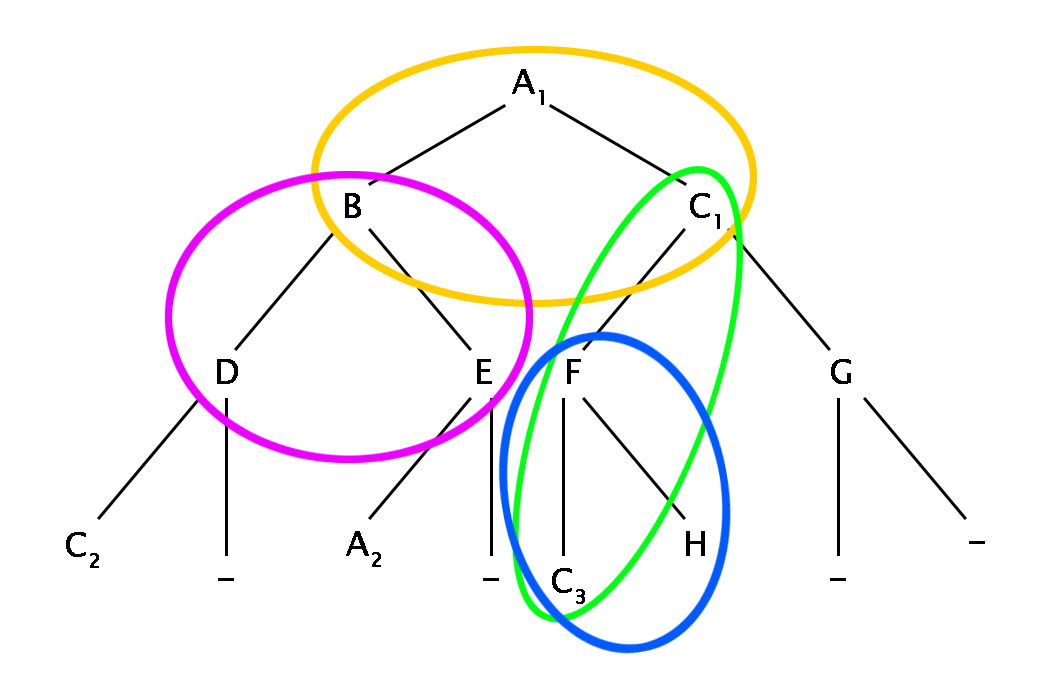
<style>
.page{position:relative;width:1050px;height:700px;background:#ffffff}
.page>*{position:absolute;margin:0}
.t1{font:12px "LucidaSansUnicode";color:#000000;font-weight:bold}
</style>
<div class="page">
<p class="t1" style="left:512px;top:69px;width:32px;height:36px;text-align:center">A1</p>
<p class="t1" style="left:345px;top:193px;width:16px;height:25px;text-align:center">B</p>
<p class="t1" style="left:690px;top:193px;width:30px;height:36px;text-align:center">C1</p>
<p class="t1" style="left:217px;top:359px;width:21px;height:25px;text-align:center">D</p>
<p class="t1" style="left:477px;top:359px;width:15px;height:25px;text-align:center">E</p>
<p class="t1" style="left:567px;top:359px;width:14px;height:25px;text-align:center">F</p>
<p class="t1" style="left:831px;top:359px;width:20px;height:25px;text-align:center">G</p>
<p class="t1" style="left:66px;top:532px;width:33px;height:36px;text-align:center">C2</p>
<p class="t1" style="left:346px;top:531px;width:35px;height:36px;text-align:center">A2</p>
<p class="t1" style="left:686px;top:531px;width:19px;height:25px;text-align:center">H</p>
<p class="t1" style="left:552px;top:568px;width:33px;height:36px;text-align:center">C3</p>
</div>
